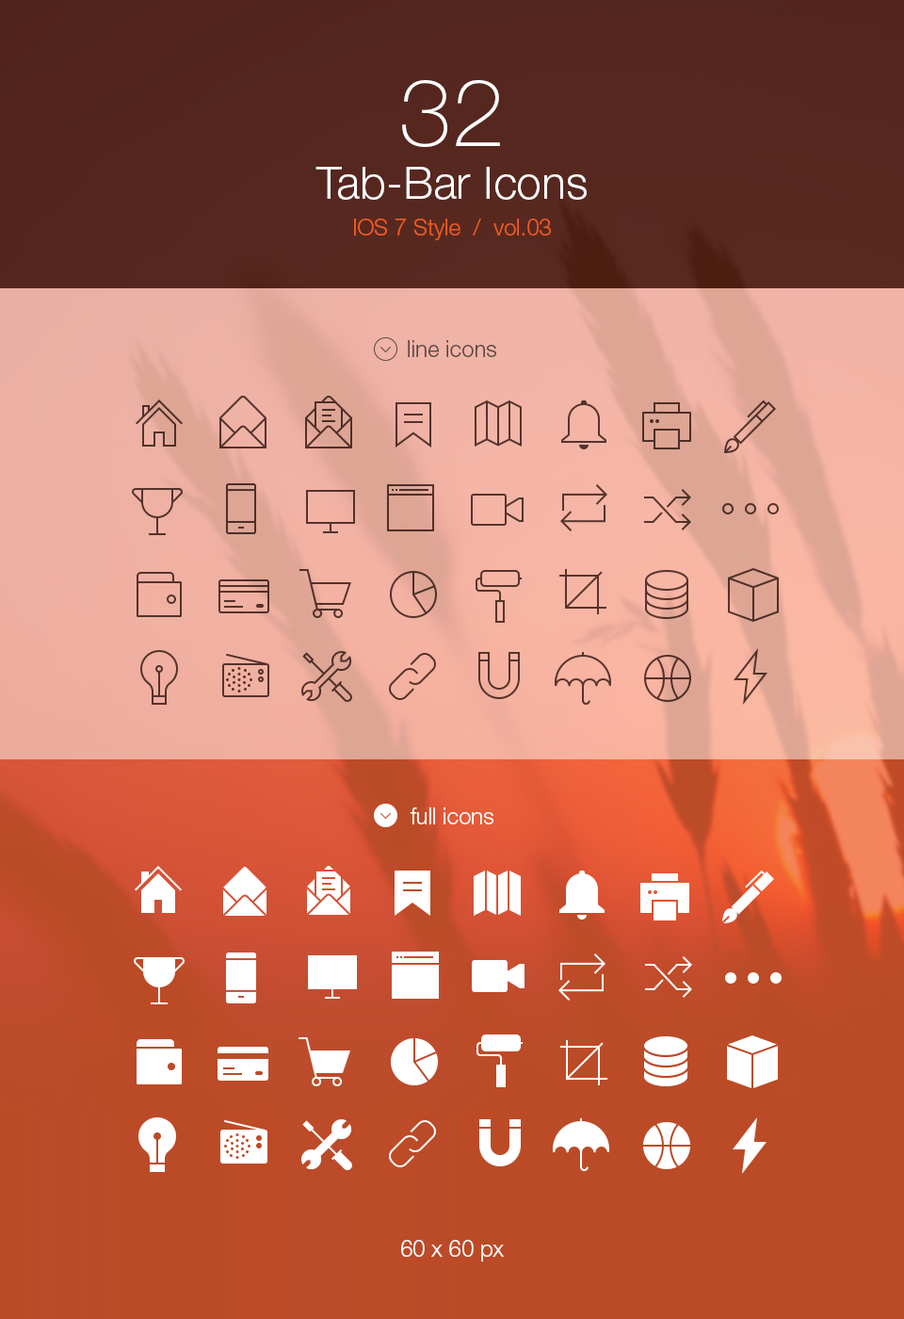
<style>
.page{position:relative;width:904px;height:1319px}
.page>*{position:absolute;margin:0}
.t1{font:22.6px/36.7px "HelveticaNeueLTStd-Lt";color:#f05b24}
.t2{font:94.2px/47.1px "HelveticaNeueLTStd-Th";color:#ffffff}
.t3{font:45.2px/52.7px "HelveticaNeueLTStd-Lt";color:#ffffff}
.t4{font:22.6px "HelveticaNeueLTStd-Lt";color:#594945}
.t5{font:22.6px "HelveticaNeueLTStd-Lt";color:#ffffff}
</style>
<div class="page">
<p class="t1" style="left:316px;top:80px;width:271px;height:160px;text-align:center"><span class="t2">32<br></span><span class="t3">Tab-Bar Icons<br></span>IOS 7 Style  /  vol.03</p>
<p class="t4" style="left:408px;top:340px;width:88px;height:17px">line icons</p>
<p class="t5" style="left:410px;top:807px;width:84px;height:17px">full icons</p>
<p class="t5" style="left:401px;top:1240px;width:103px;height:21px">60 x 60 px</p>
</div>
